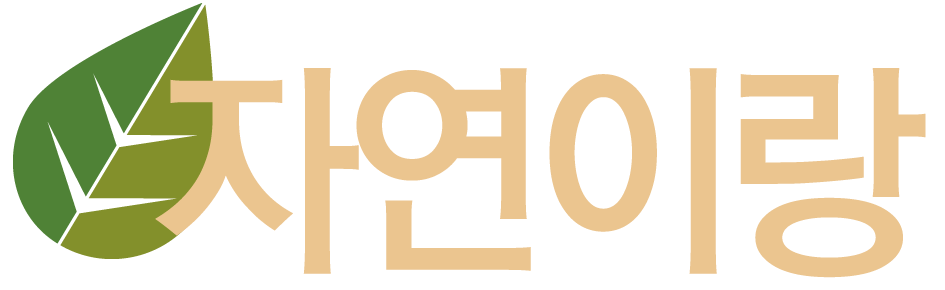
<style>
.page{position:relative;width:945px;height:290px;background:#ffffff}
.page>*{position:absolute;margin:0}
.t1{font:230px "RixGoB";letter-spacing:-0.075em;color:#ebc58f}
</style>
<div class="page">
<p class="t1" style="left:155px;top:68px;width:771px;height:210px">자연이랑</p>
</div>
